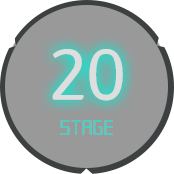
<style>
.page{position:relative;width:174px;height:174px;background:#999999}
.page>*{position:absolute;margin:0}
.t1{font:73.4px "12LotteMartDreamMedium";color:#dedede}
.t2{font:23.2px "Digital-7";color:#4ccfc2}
</style>
<div class="page">
<p class="t1" style="left:52px;top:49px;width:71px;height:52px">20</p>
<p class="t2" style="left:60px;top:120px;width:53px;height:15px">STAGE</p>
</div>
